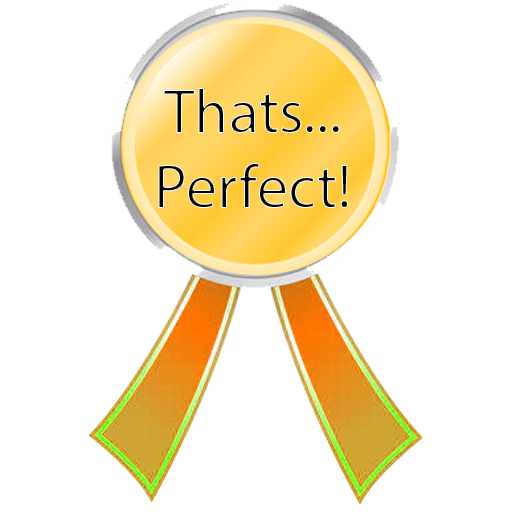
<style>
.page{position:relative;width:512px;height:512px;background:#ffffff}
.page>*{position:absolute;margin:0}
.t1{font:62.3px "MyriadPro-Regular"}
</style>
<div class="page">
<p class="t1" style="left:158px;top:88px;width:190px;height:120px;text-align:center">Thats...<br>Perfect!</p>
</div>
